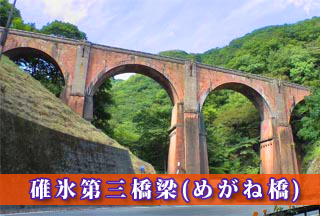
<style>
.page{position:relative;width:320px;height:216px}
.page>*{position:absolute;margin:0}
.t1{font:21px "KozMinPr6N-Heavy";letter-spacing:0.2em;color:#ffffff}
</style>
<div class="page">
<p class="t1" style="left:30px;top:179px;width:269px;height:23px">碓氷第三橋梁(めがね橋)</p>
</div>
